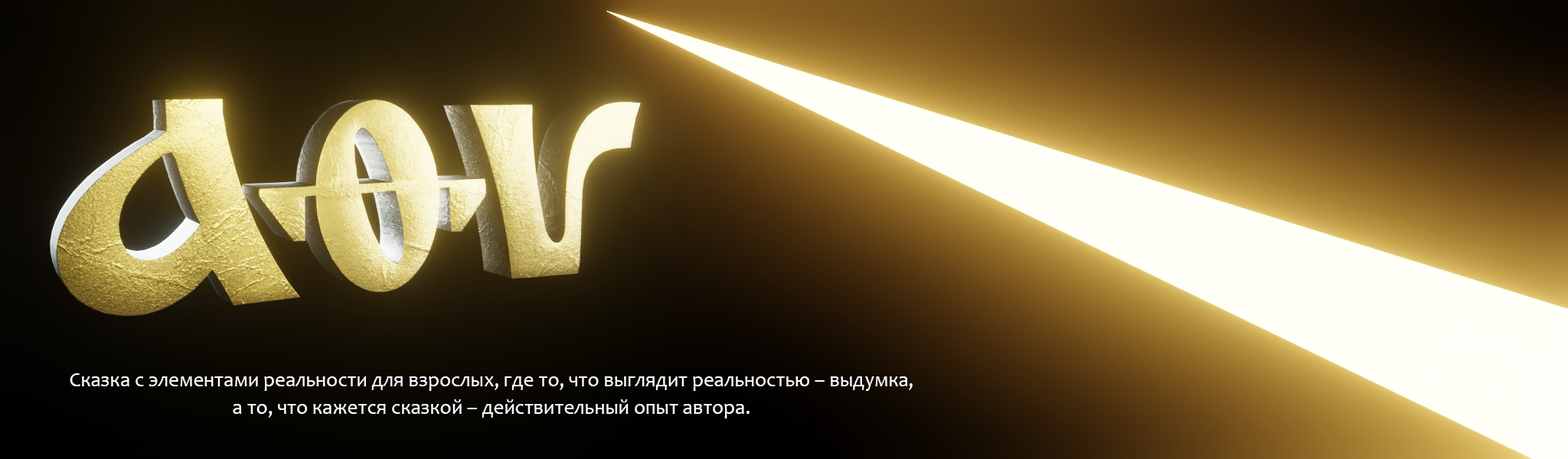
<style>
.page{position:relative;width:1568px;height:459px}
.page>*{position:absolute;margin:0}
.t1{font:20.7px/27.6px "Candara";color:#fefbfb}
</style>
<div class="page">
<p class="t1" style="left:70px;top:374px;width:843px;height:45px;text-align:center">Cказка с элементами реальности для взрослых, где то, что выглядит реальностью – выдумка, <br>а то, что кажется сказкой – действительный опыт автора.</p>
</div>
